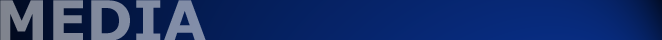
<style>
.page{position:relative;width:662px;height:40px}
.page>*{position:absolute;margin:0}
.t1{font:56px "Verdana-Bold";letter-spacing:-0.005em;color:#81899d}
</style>
<div class="page">
<p class="t1" style="left:0px;top:0px;width:206px;height:41px">MEDIA</p>
</div>
